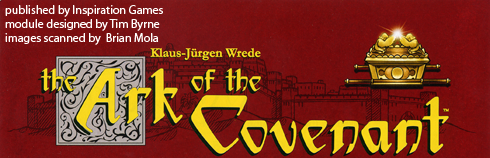
<style>
.page{position:relative;width:490px;height:158px}
.page>*{position:absolute;margin:0}
.t1{font:12px "MyriadPro-Regular";color:#fffefc}
</style>
<div class="page">
<p class="t1" style="left:5px;top:5px;width:158px;height:40px">published by Inspiration Games<br>module designed by Tim Byrne<br>images scanned by  Brian Mola</p>
</div>
